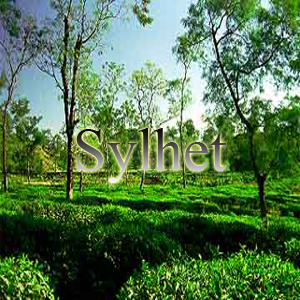
<style>
.page{position:relative;width:300px;height:300px}
.page>*{position:absolute;margin:0}
.t1{font:60px "TimesNewRomanPSMT"}
</style>
<div class="page">
<p class="t1" style="left:76px;top:128px;width:151px;height:55px">Sylhet</p>
</div>
